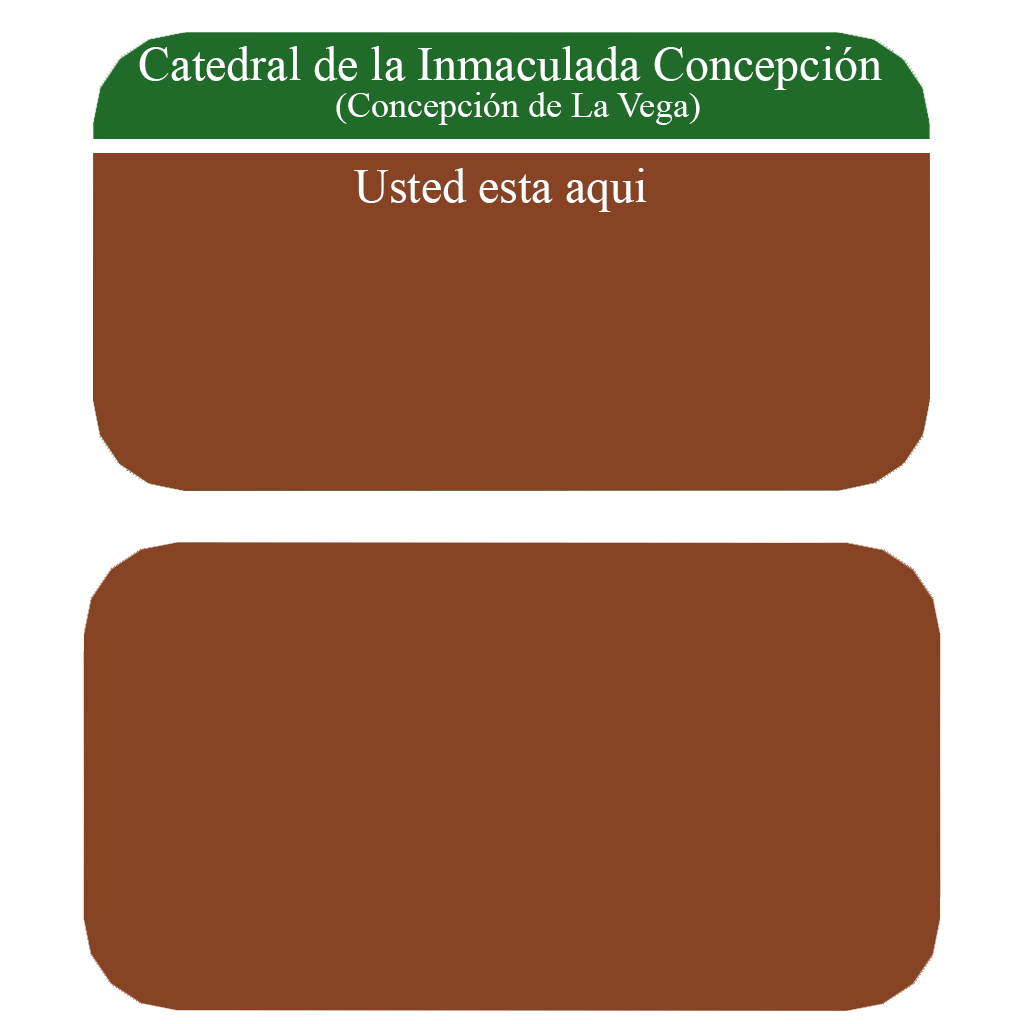
<style>
.page{position:relative;width:1024px;height:1024px;background:#864424}
.page>*{position:absolute;margin:0}
.t1{font:48px "TimesNewRomanPSMT";color:#ffffff}
.t2{font:36px "TimesNewRomanPSMT";color:#ffffff}
</style>
<div class="page">
<p class="t1" style="left:139px;top:46px;width:743px;height:44px">Catedral de la Inmaculada Concepción</p>
<p class="t2" style="left:336px;top:92px;width:364px;height:33px">(Concepción de La Vega)</p>
<p class="t1" style="left:354px;top:168px;width:293px;height:44px">Usted esta aqui</p>
</div>
